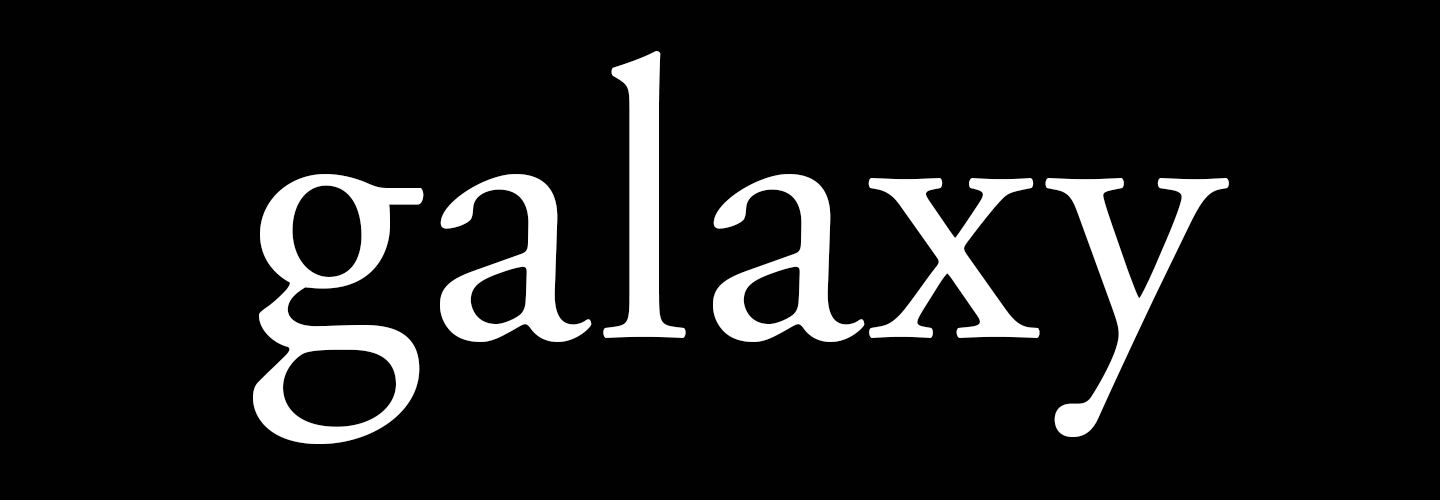
<style>
.page{position:relative;width:1440px;height:500px;background:#010101}
.page>*{position:absolute;margin:0}
.t1{font:400px "AGaramondPro-Regular";letter-spacing:0.015em;color:#ffffff}
</style>
<div class="page">
<p class="t1" style="left:253px;top:51px;width:976px;height:394px">galaxy</p>
</div>
